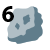
<style>
.page{position:relative;width:50px;height:50px;background:#ffffff}
.page>*{position:absolute;margin:0}
.t1{font:24px "MyriadHebrew-Bold";color:#000000}
</style>
<div class="page">
<p class="t1" style="left:2px;top:6px;width:12px;height:16px">6</p>
</div>
